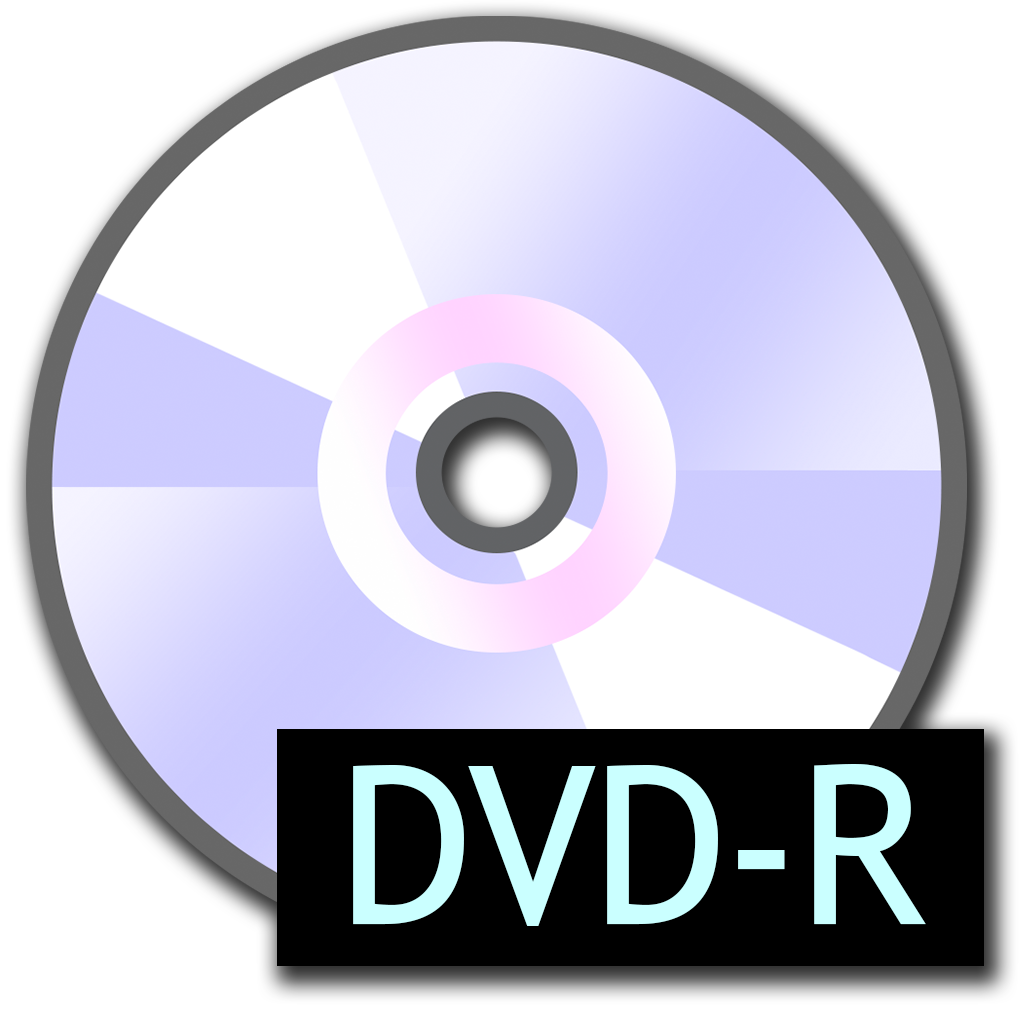
<style>
.page{position:relative;width:1024px;height:1024px;background:#ffffff}
.page>*{position:absolute;margin:0}
.t1{font:220.9px "TrebuchetMS";letter-spacing:-0.025em;color:#caffff}
</style>
<div class="page">
<p class="t1" style="left:353px;top:764px;width:573px;height:162px">DVD-R</p>
</div>
